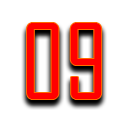
<style>
.page{position:relative;width:128px;height:128px;background:#ffffff}
.page>*{position:absolute;margin:0}
.t1{font:100px "AgencyFB-Reg";color:#ff0000}
</style>
<div class="page">
<p class="t1" style="left:27px;top:23px;width:75px;height:76px">09</p>
</div>
